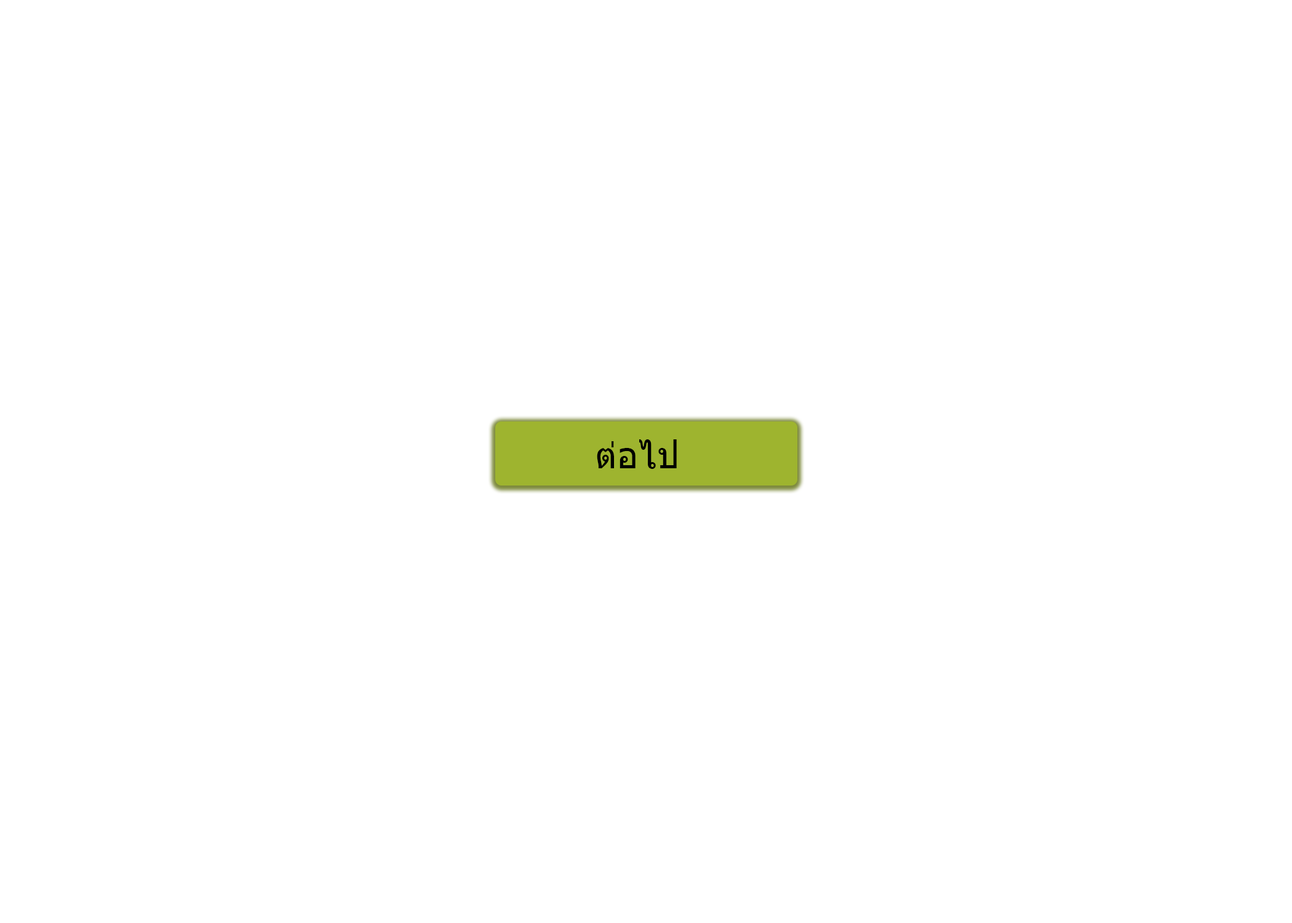
<style>
.page{position:relative;width:1292px;height:923px;background:#ffffff}
.page>*{position:absolute;margin:0}
.t1{font:35.9px "Tahoma";color:#000000}
</style>
<div class="page">
<p class="t1" style="left:597px;top:439px;width:80px;height:30px">ต่อไป</p>
</div>
